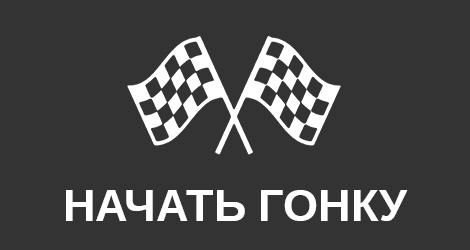
<style>
.page{position:relative;width:470px;height:250px;background:#333333}
.page>*{position:absolute;margin:0}
.t1{font:45px "LiberationSans-Bold";color:#ffffff;text-transform:uppercase}
</style>
<div class="page">
<p class="t1" style="left:66px;top:190px;width:342px;height:31px">начать гонку</p>
</div>
